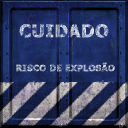
<style>
.page{position:relative;width:128px;height:128px}
.page>*{position:absolute;margin:0}
.t1{font:17.3px "Tahoma-Bold";letter-spacing:0.02em;font-weight:bold}
.t2{font:8.7px "Tahoma-Bold";letter-spacing:0.02em;text-transform:uppercase;font-weight:bold}
</style>
<div class="page">
<p class="t1" style="left:19px;top:24px;width:90px;height:14px">CUIDADO</p>
<p class="t2" style="left:16px;top:62px;width:99px;height:10px">Risco de explosão</p>
</div>
